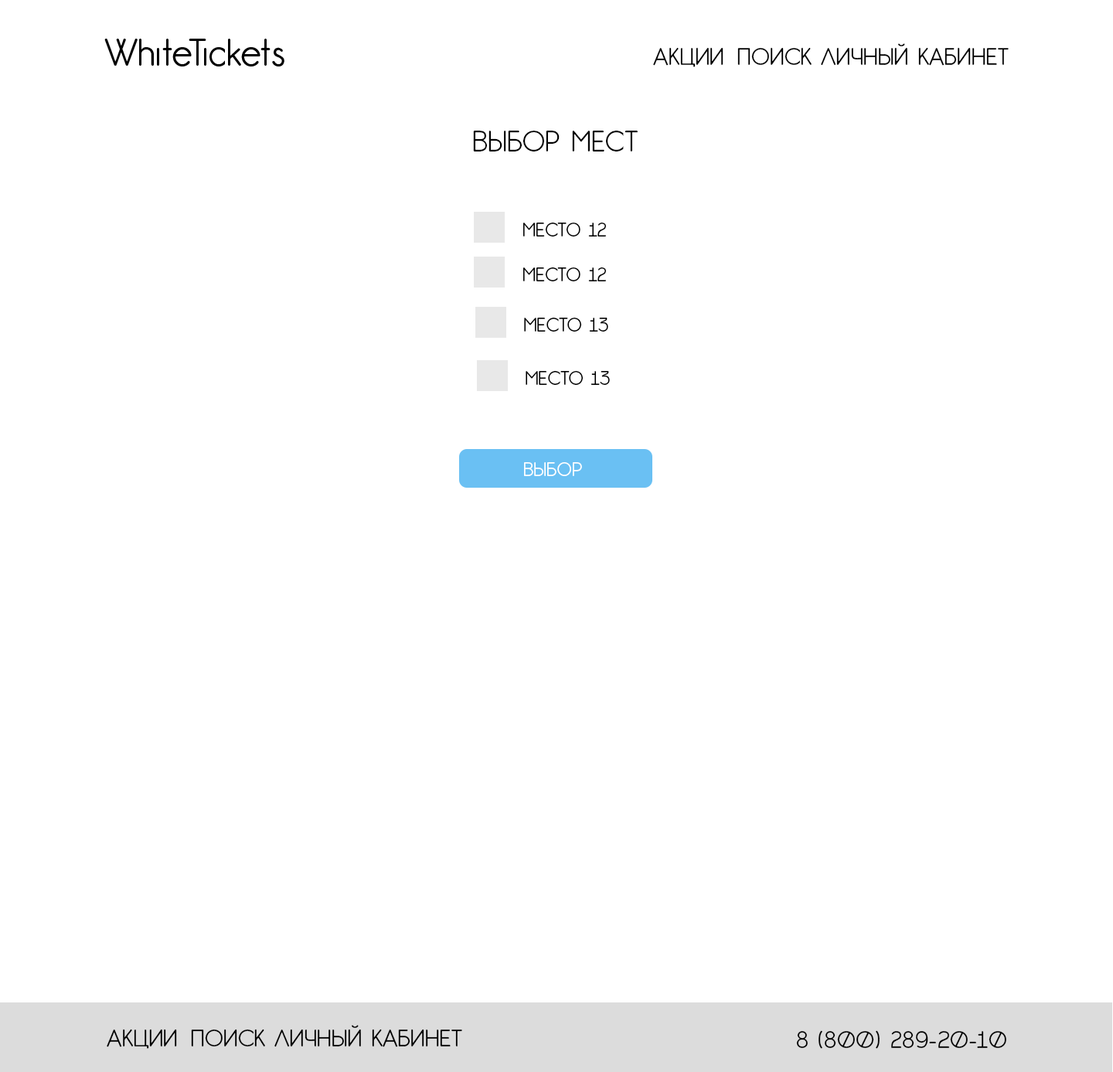
<style>
.page{position:relative;width:1113px;height:1072px;background:#ffffff}
.page>*{position:absolute;margin:0}
.t1{font:23.2px "GardensC";color:#000000}
.t2{font:27.8px "GardensC";color:#000000}
.t3{font:18.5px "GardensC";color:#000000}
.t4{font:18.5px "GardensC";color:#ffffff}
</style>
<div class="page">
<p class="t1" style="left:653px;top:43px;width:355px;height:24px">АКЦИИ ПОИСК ЛИЧНЫЙ КАБИНЕТ</p>
<p class="t2" style="left:473px;top:131px;width:164px;height:20px">ВЫБОР МЕСТ</p>
<p class="t3" style="left:523px;top:223px;width:83px;height:13px">МЕСТО 12</p>
<p class="t3" style="left:523px;top:267px;width:83px;height:14px">МЕСТО 12</p>
<p class="t3" style="left:524px;top:318px;width:84px;height:13px">МЕСТО 13</p>
<p class="t3" style="left:525px;top:371px;width:85px;height:14px">МЕСТО 13</p>
<p class="t4" style="left:524px;top:462px;width:58px;height:14px">ВЫБОР</p>
<p class="t1" style="left:107px;top:1025px;width:355px;height:24px">АКЦИИ ПОИСК ЛИЧНЫЙ КАБИНЕТ</p>
<p class="t1" style="left:796px;top:1030px;width:210px;height:19px">8 (800) 289-20-10</p>
</div>
